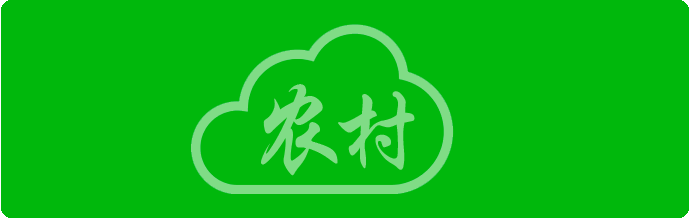
<style>
.page{position:relative;width:689px;height:218px;background:#00b80c}
.page>*{position:absolute;margin:0}
.t1{font:100px "STXingkai";letter-spacing:-0.2em;color:#80dc86}
</style>
<div class="page">
<p class="t1" style="left:261px;top:84px;width:154px;height:92px">农村</p>
</div>
